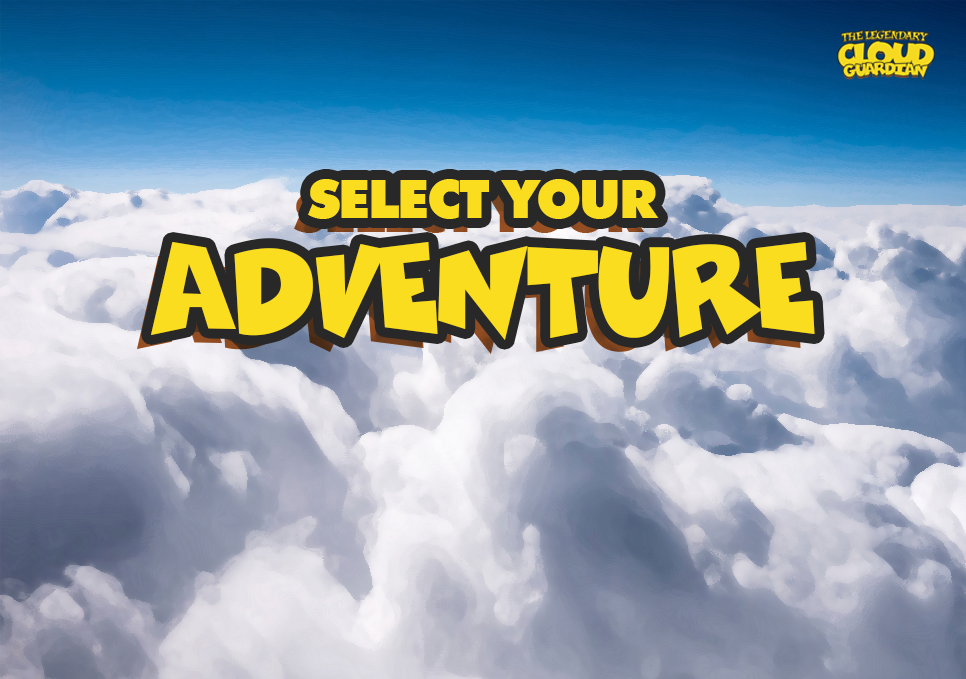
<style>
.page{position:relative;width:966px;height:679px}
.page>*{position:absolute;margin:0}
.t1{font:53.7px "FuturaBT-ExtraBlack";letter-spacing:-0.04em;color:#fadd1f}
.t2{font:120.5px "ComicsCarToon";letter-spacing:-0.04em;color:#fadd1f}
</style>
<div class="page">
<p class="t1" style="left:308px;top:179px;width:351px;height:40px">SELECT YOUR</p>
<p class="t2" style="left:151px;top:242px;width:664px;height:98px">ADVENTURE</p>
</div>
